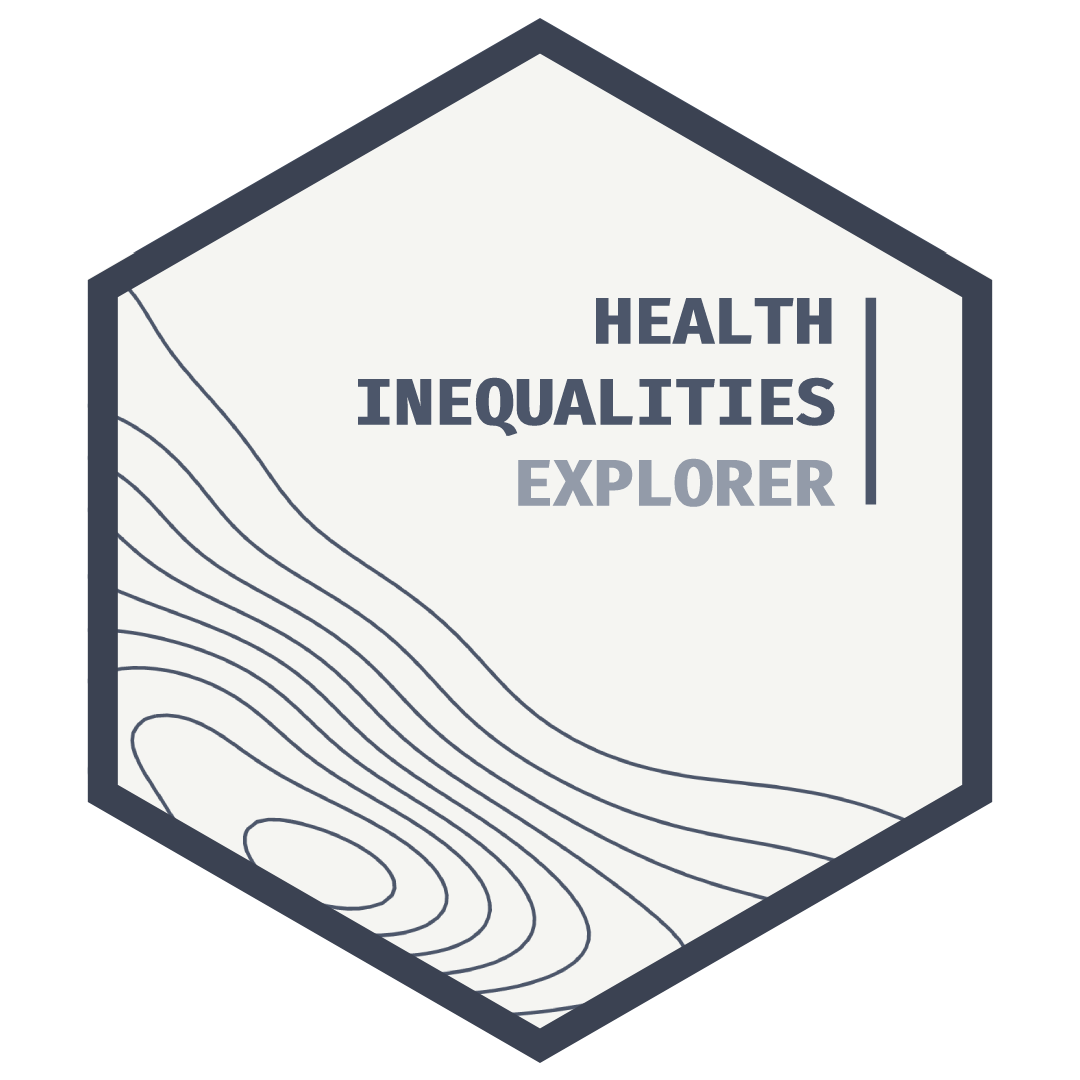
<style>
.page{position:relative;width:1080px;height:1080px;background:#f5f5f2}
.page>*{position:absolute;margin:0}
.t1{font:66px "FiraCode-Bold";color:#4c566a;font-weight:bold}
.t2{font:66px "FiraCode-Bold";color:#939ba9;font-weight:bold}
</style>
<div class="page">
<p class="t1" style="left:595px;top:297px;width:237px;height:47px">HEALTH</p>
<p class="t1" style="left:358px;top:377px;width:477px;height:60px">INEQUALITIES</p>
<p class="t2" style="left:518px;top:458px;width:318px;height:49px">EXPLORER</p>
</div>
